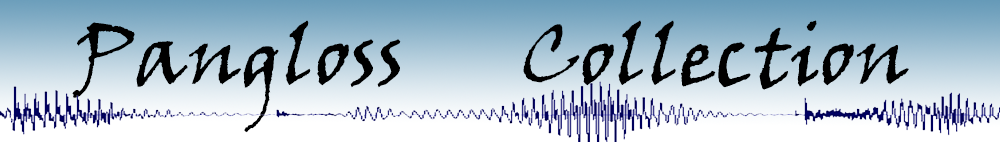
<style>
.page{position:relative;width:1000px;height:142px}
.page>*{position:absolute;margin:0}
.t1{font:83.3px "VinerHandITC";color:#000000}
</style>
<div class="page">
<p class="t1" style="left:72px;top:20px;width:837px;height:113px">Pangloss      Collection</p>
</div>
